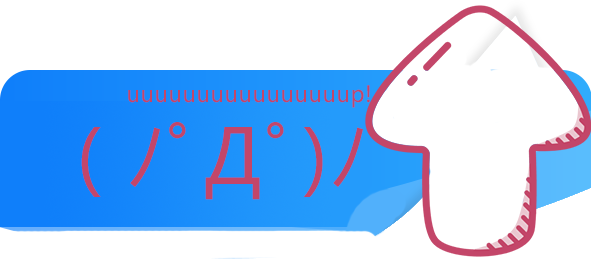
<style>
.page{position:relative;width:591px;height:271px;background:#ffffff}
.page>*{position:absolute;margin:0}
.t1{font:22px "MicrosoftYaHeiUI";letter-spacing:0.02em;color:#c34669}
.t2{font:75.4px "MicrosoftYaHeiUI";letter-spacing:0.02em;color:#c34669}
</style>
<div class="page">
<p class="t1" style="left:128px;top:85px;width:242px;height:23px">uuuuuuuuuuuuuuuup!</p>
<p class="t2" style="left:81px;top:122px;width:282px;height:78px">( ﾉﾟДﾟ)ﾉ</p>
</div>
